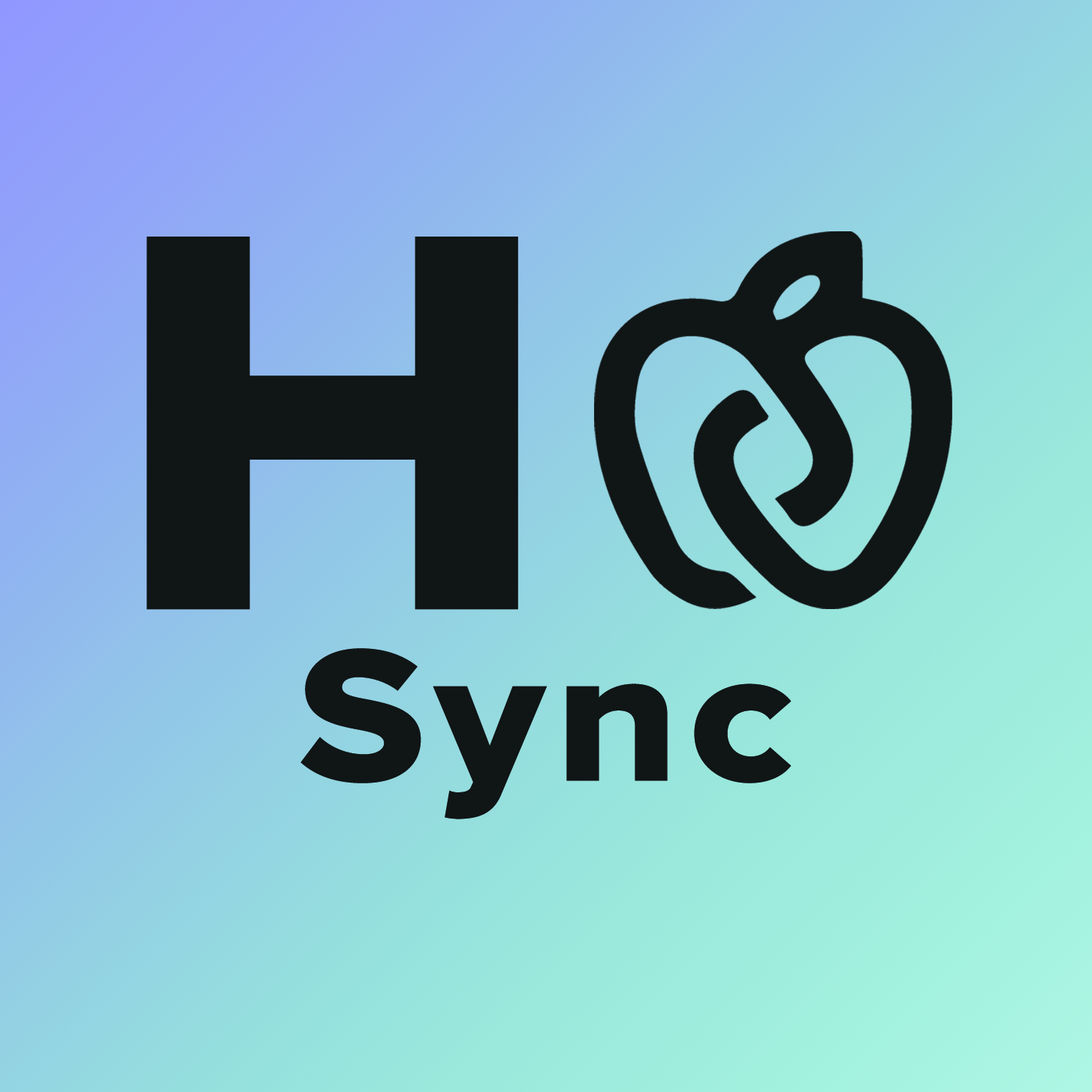
<style>
.page{position:relative;width:1092px;height:1092px}
.page>*{position:absolute;margin:0}
.t1{font:558.4px "ProximaNova-Extrabld";letter-spacing:0.2em;color:#101516;scale:1.07 1}
.t2{font:195.1px "ProximaNova-Extrabld";letter-spacing:0.05em;color:#101516;scale:1.07 1}
</style>
<div class="page">
<p class="t1" style="left:146px;top:237px;width:372px;height:373px">H</p>
<p class="t2" style="left:300px;top:648px;width:492px;height:171px">Sync</p>
</div>
